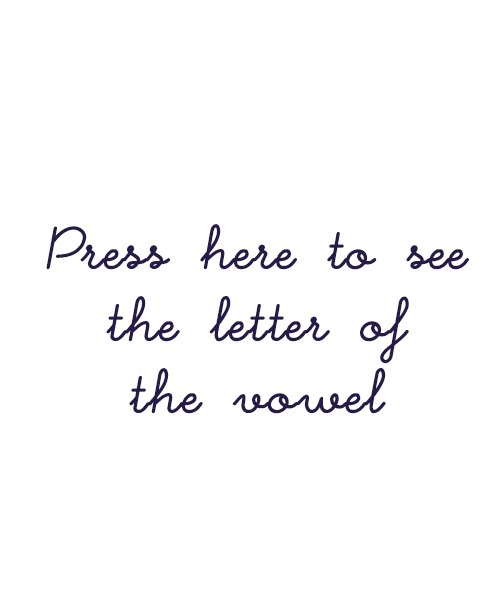
<style>
.page{position:relative;width:500px;height:600px;background:#ffffff}
.page>*{position:absolute;margin:0}
.t1{font:60px "LittleDays";color:#241b47;font-weight:bold;font-style:italic}
</style>
<div class="page">
<p class="t1" style="left:46px;top:224px;width:423px;height:190px;text-align:center">Press here to see<br>the letter of<br>the vowel</p>
</div>
